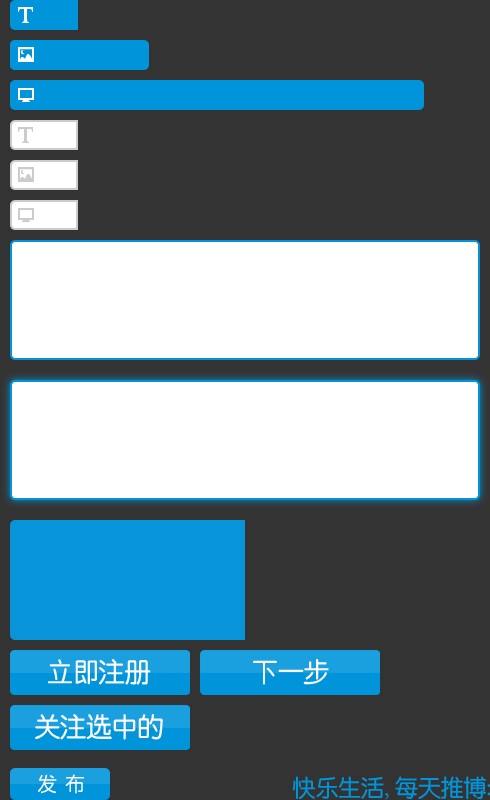
<style>
.page{position:relative;width:490px;height:800px;background:#333333}
.page>*{position:absolute;margin:0}
.t1{font:27.1px "By-JOSSQ-DMF-in-BeiJing";letter-spacing:-0.05em;color:#fefefe}
.t2{font:20px "By-JOSSQ-DMF-in-BeiJing";letter-spacing:-0.05em;color:#fefefe}
.t3{font:24px "By-JOSSQ-DMF-in-BeiJing";letter-spacing:-0.05em;color:#0095da}
.t4{font:24px "By-JOSSQ-DMF-in-BeiJing";letter-spacing:-0.53em;color:#0095da}
</style>
<div class="page">
<p class="t1" style="left:48px;top:659px;width:103px;height:26px">立即注册</p>
<p class="t1" style="left:253px;top:659px;width:76px;height:26px">下一步</p>
<p class="t1" style="left:35px;top:714px;width:128px;height:26px">关注选中的</p>
<p class="t2" style="left:38px;top:774px;width:46px;height:20px">发 布</p>
<p class="t3" style="left:292px;top:776px;width:199px;height:24px">快乐生活<span class="t4">，</span>每天推博：</p>
</div>
